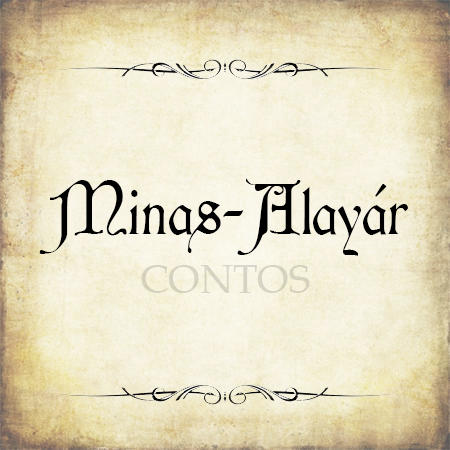
<style>
.page{position:relative;width:450px;height:450px}
.page>*{position:absolute;margin:0}
.t1{font:70px "Cardinal-Alternate";color:#000000}
.t2{font:40px "BookAntiqua";color:#d7d3c1}
</style>
<div class="page">
<p class="t1" style="left:39px;top:178px;width:369px;height:78px">Minas-Alayár</p>
<p class="t2" style="left:141px;top:265px;width:169px;height:28px">CONTOS</p>
</div>
